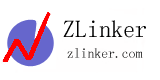
<style>
.page{position:relative;width:160px;height:80px;background:#ffffff}
.page>*{position:absolute;margin:0}
.t1{font:24px "Á¥Êé-Regular";color:#000000}
.t2{font:13.7px "Á¥Êé-Regular";color:#000000}
</style>
<div class="page">
<p class="t1" style="left:63px;top:20px;width:83px;height:18px">ZLinker</p>
<p class="t2" style="left:67px;top:48px;width:76px;height:10px">zlinker.com</p>
</div>
